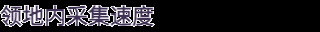
<style>
.page{position:relative;width:320px;height:32px;background:#000000}
.page>*{position:absolute;margin:0}
.t1{font:22px "WebPSD-18463539-0-Regular";color:#3f3254;font-weight:bold}
</style>
<div class="page">
<p class="t1" style="left:0px;top:0px;width:320px;height:32px">领地内采集速度</p>
</div>
